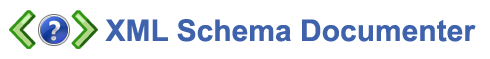
<style>
.page{position:relative;width:490px;height:59px;background:#ffffff}
.page>*{position:absolute;margin:0}
.t1{font:30px "Arial-BoldMT";color:#3e62ab}
</style>
<div class="page">
<p class="t1" style="left:105px;top:19px;width:371px;height:23px">XML Schema Documenter</p>
</div>
